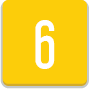
<style>
.page{position:relative;width:89px;height:89px;background:#fccd0a}
.page>*{position:absolute;margin:0}
.t1{font:60px "LibelSuitRg-Regular";color:#ffffff}
</style>
<div class="page">
<p class="t1" style="left:35px;top:20px;width:20px;height:49px">6</p>
</div>
